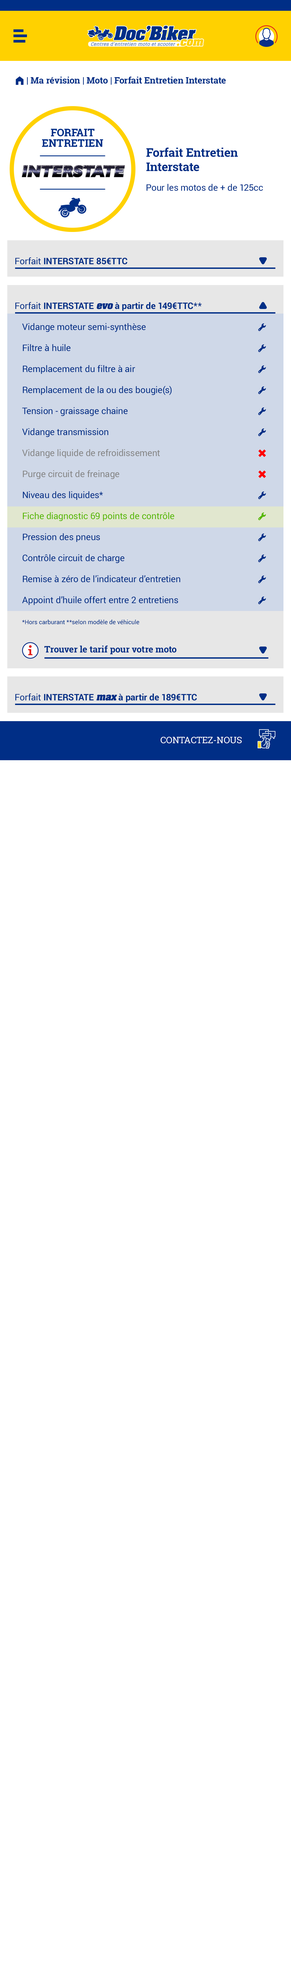
<style>
.page{position:relative;width:291px;height:1987px;background:#ffffff}
.page>*{position:absolute;margin:0}
.t1{font:9px "RobotoSlab-Bold";color:#002e86}
.t2{font:9px "FoundationIconsGeneral-Reg";color:#002e86}
.t3{font:12px "RobotoSlab-Bold";color:#002e86}
.t4{font:9px "Roboto-Regular";color:#002e86}
.t5{font:9px "Roboto-Bold";color:#002e86}
.t6{font:9px "Roboto-Bold";color:#002e86;text-transform:uppercase}
.t7{font:9px/21px "Roboto-Regular";color:#002e86}
.t8{font:9px/36px "Roboto-Regular";color:#002e86}
.t9{font:9px/36px "Roboto-Bold";color:#002e86}
.t10{font:9px/27px "Aachen-Bold";color:#002e86;font-style:italic}
.t11{font:9px/27px "Roboto-Bold";color:#002e86}
.t12{font:9px/27px "Roboto-Bold";color:#002e86;text-transform:uppercase}
.t13{font:9px/21px "Roboto-Regular";color:#868686}
.t14{font:9px/21px "Roboto-Regular";color:#56b700}
.t15{font:6px/21px "Roboto-Regular";color:#002e86}
.t16{font:9px "Aachen-Bold";color:#002e86;font-style:italic}
.t17{font:9px "RobotoSlab-Regular";color:#ffffff;text-transform:uppercase}
</style>
<div class="page">
<p class="t1" style="left:16px;top:76px;width:210px;height:9px"><span class="t2">m </span>| Ma révision | Moto | Forfait Entretien Interstate</p>
<p class="t3" style="left:146px;top:147px;width:92px;height:24px">Forfait Entretien<br>Interstate</p>
<p class="t4" style="left:147px;top:184px;width:116px;height:7px">Pour les motos de + de 125cc</p>
<p class="t5" style="left:15px;top:257px;width:112px;height:7px"><span class="t4">Forfait </span>INTERSTATE <span class="t6">85€TTC</span></p>
<p class="t7" style="left:15px;top:302px;width:187px;height:322px"><span class="t8">Forfait </span><span class="t9">INTERSTATE </span><span class="t10">evo</span><span class="t11"> à partir de </span><span class="t12">149€TTC**<br></span>Vidange moteur semi-synthèse<br>Filtre à huile<br>Remplacement du filtre à air<br>Remplacement de la ou des bougie(s)<br>Tension - graissage chaine<br>Vidange transmission<br><span class="t13">Vidange liquide de refroidissement<br>Purge circuit de freinage<br></span>Niveau des liquides*<br><span class="t14">Fiche diagnostic 69 points de contrôle<br></span>Pression des pneus<br>Contrôle circuit de charge<br>Remise à zéro de l’indicateur d’entretien<br>Appoint d’huile offert entre 2 entretiens<br><span class="t15">*Hors carburant **selon modèle de véhicule</span></p>
<p class="t1" style="left:44px;top:645px;width:132px;height:9px">Trouver le tarif pour votre moto</p>
<p class="t5" style="left:15px;top:693px;width:182px;height:9px"><span class="t4">Forfait </span>INTERSTATE <span class="t16">max</span> à partir de <span class="t6">189€TTC</span></p>
<p class="t17" style="left:161px;top:737px;width:81px;height:6px">contactez-nous</p>
</div>
